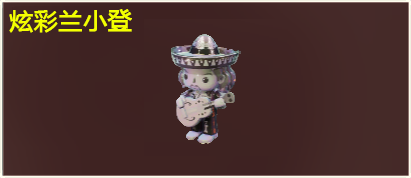
<style>
.page{position:relative;width:411px;height:178px}
.page>*{position:absolute;margin:0}
.t1{font:24px "MicrosoftYaHeiUI";color:#f4ff00;font-weight:bold}
</style>
<div class="page">
<p class="t1" style="left:9px;top:9px;width:123px;height:24px">炫彩兰小登</p>
</div>
